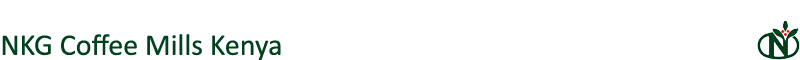
<style>
.page{position:relative;width:800px;height:60px;background:#ffffff}
.page>*{position:absolute;margin:0}
.t1{font:30px "Calibri";color:#00411e}
</style>
<div class="page">
<p class="t1" style="left:2px;top:34px;width:279px;height:27px">NKG Coffee Mills Kenya</p>
</div>
